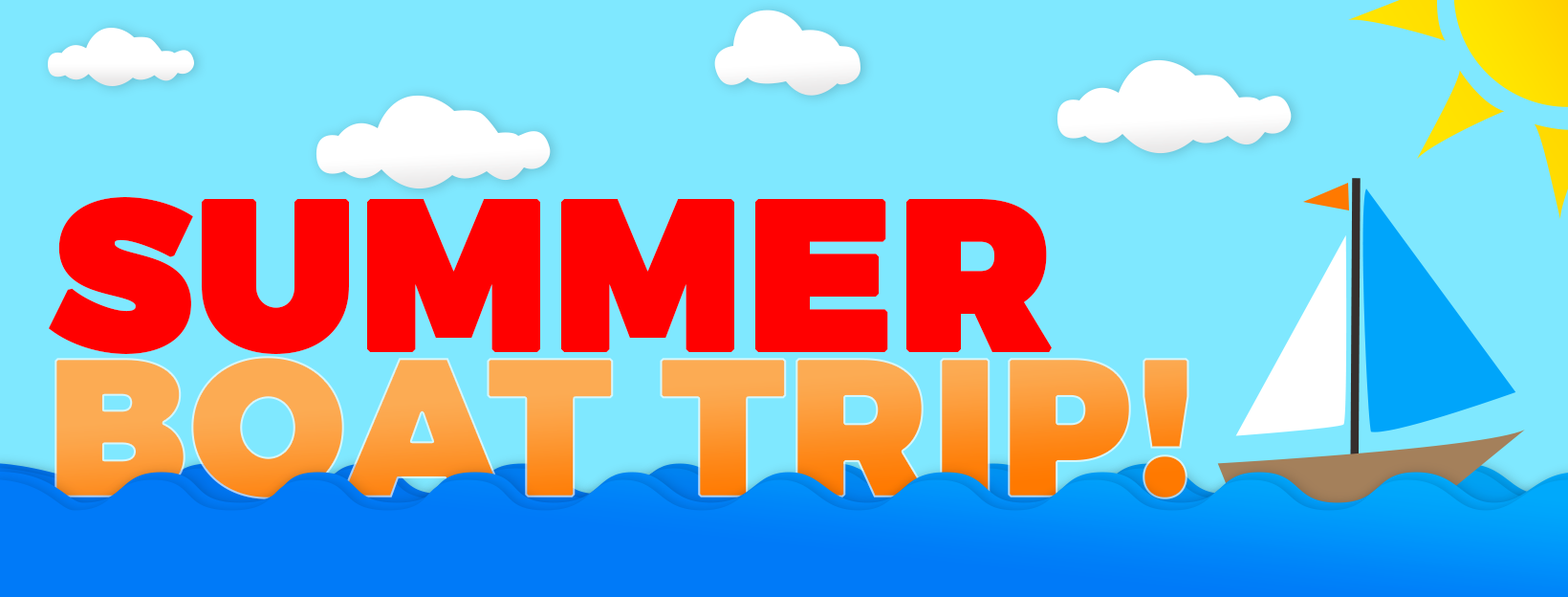
<style>
.page{position:relative;width:1568px;height:597px;background:#7fe8ff}
.page>*{position:absolute;margin:0}
.t1{font:210.3px "Montserrat-Black";color:#ff0000;text-transform:uppercase;font-weight:bold}
.t2{font:191.2px "Montserrat-Black";text-transform:uppercase;font-weight:bold}
</style>
<div class="page">
<p class="t1" style="left:48px;top:197px;width:1004px;height:157px">Summer</p>
<p class="t2" style="left:54px;top:356px;width:1135px;height:143px">Boat Trip!</p>
</div>
